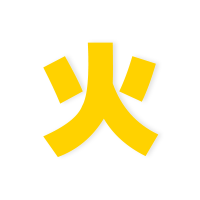
<style>
.page{position:relative;width:200px;height:200px;background:#ffffff}
.page>*{position:absolute;margin:0}
.t1{font:120px "TXWTeCuHei-M10S";color:#ffd200}
</style>
<div class="page">
<p class="t1" style="left:43px;top:42px;width:116px;height:115px">火</p>
</div>
